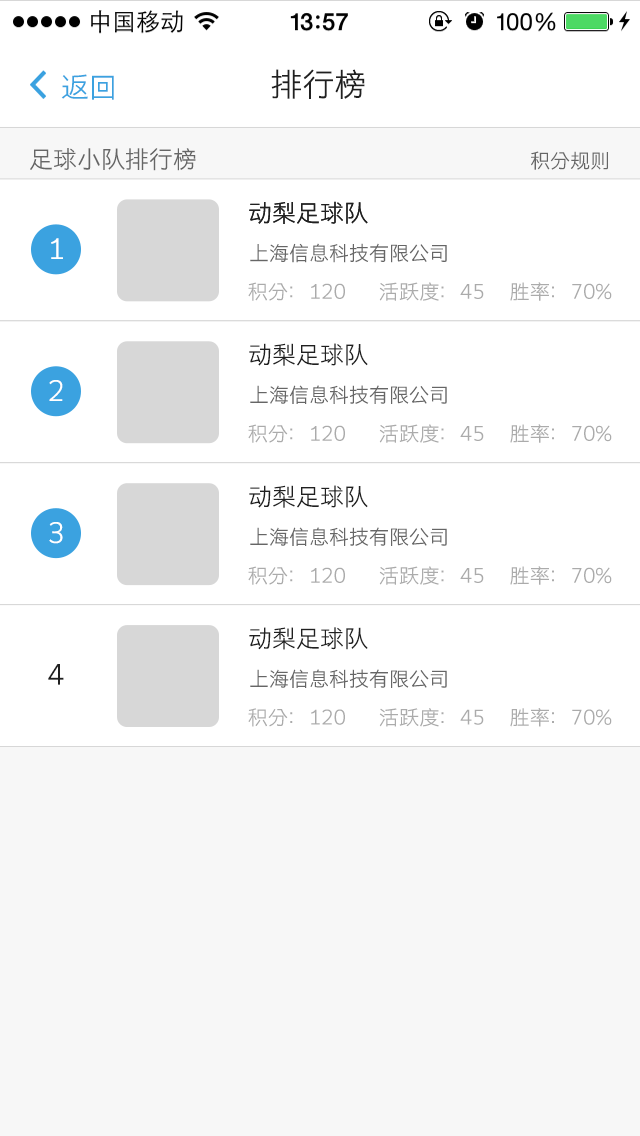
<style>
.page{position:relative;width:640px;height:1136px;background:#ffffff}
.page>*{position:absolute;margin:0}
.t1{font:28px "STHeitiSC-Light";color:#3ba2e0}
.t2{font:32px "STHeitiSC-Light";color:#202020}
.t3{font:24px "STHeitiSC-Light";color:#666666}
.t4{font:20px "STHeitiSC-Light";color:#666666}
.t5{font:24px "STHeitiSC-Light";color:#202020}
.t6{font:28px "STHeitiSC-Light";color:#ffffff}
.t7{font:20px "STHeitiSC-Light";color:#ababab}
.t8{font:28px "STHeitiSC-Light";color:#202020}
</style>
<div class="page">
<p class="t1" style="left:61px;top:74px;width:53px;height:26px">返回</p>
<p class="t2" style="left:271px;top:69px;width:94px;height:30px">排行榜</p>
<p class="t3" style="left:30px;top:148px;width:166px;height:23px">足球小队排行榜</p>
<p class="t4" style="left:531px;top:151px;width:77px;height:19px">积分规则</p>
<p class="t5" style="left:249px;top:201px;width:119px;height:23px">动梨足球队</p>
<p class="t5" style="left:249px;top:201px;width:119px;height:23px">动梨足球队</p>
<p class="t6" style="left:51px;top:238px;width:12px;height:21px">1</p>
<p class="t4" style="left:250px;top:243px;width:197px;height:20px">上海信息科技有限公司</p>
<p class="t7" style="left:248px;top:282px;width:364px;height:19px">积分：120        活跃度：45      胜率：70%</p>
<p class="t5" style="left:249px;top:343px;width:119px;height:23px">动梨足球队</p>
<p class="t6" style="left:49px;top:380px;width:14px;height:21px">2</p>
<p class="t4" style="left:250px;top:385px;width:197px;height:19px">上海信息科技有限公司</p>
<p class="t7" style="left:248px;top:424px;width:364px;height:19px">积分：120        活跃度：45      胜率：70%</p>
<p class="t5" style="left:249px;top:485px;width:119px;height:23px">动梨足球队</p>
<p class="t6" style="left:49px;top:522px;width:14px;height:22px">3</p>
<p class="t4" style="left:250px;top:527px;width:197px;height:19px">上海信息科技有限公司</p>
<p class="t7" style="left:248px;top:566px;width:364px;height:19px">积分：120        活跃度：45      胜率：70%</p>
<p class="t5" style="left:249px;top:627px;width:119px;height:23px">动梨足球队</p>
<p class="t8" style="left:48px;top:664px;width:16px;height:21px">4</p>
<p class="t4" style="left:250px;top:669px;width:197px;height:19px">上海信息科技有限公司</p>
<p class="t7" style="left:248px;top:708px;width:364px;height:19px">积分：120        活跃度：45      胜率：70%</p>
</div>
